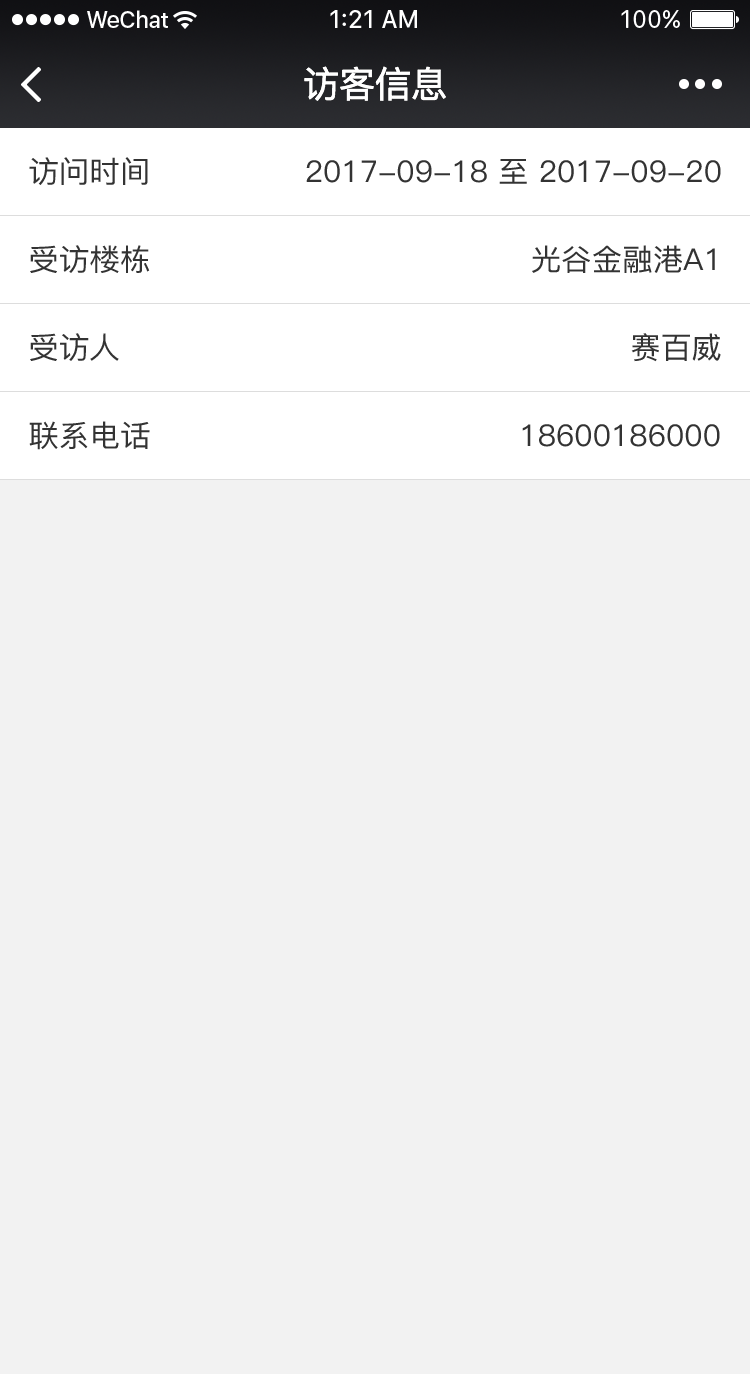
<style>
.page{position:relative;width:750px;height:1374px;background:#f2f2f2}
.page>*{position:absolute;margin:0}
.t1{font:36px "PingFangSC-Regular";color:#ffffff}
.t2{font:30px "PingFang-SC-Medium";color:#333333}
</style>
<div class="page">
<p class="t1" style="left:304px;top:66px;width:142px;height:35px">访客信息</p>
<p class="t2" style="left:29px;top:157px;width:119px;height:28px">访问时间</p>
<p class="t2" style="left:306px;top:159px;width:415px;height:25px">2017-09-18 至 2017-09-20</p>
<p class="t2" style="left:30px;top:245px;width:120px;height:28px">受访楼栋</p>
<p class="t2" style="left:532px;top:245px;width:183px;height:28px">光谷金融港A1</p>
<p class="t2" style="left:30px;top:333px;width:89px;height:28px">受访人</p>
<p class="t2" style="left:631px;top:333px;width:90px;height:29px">赛百威</p>
<p class="t2" style="left:29px;top:421px;width:121px;height:29px">联系电话</p>
<p class="t2" style="left:522px;top:424px;width:198px;height:23px">18600186000</p>
</div>
